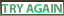
<style>
.page{position:relative;width:64px;height:16px;background:#ffffff}
.page>*{position:absolute;margin:0}
.t1{font:13px "MyriadPro-Bold";scale:0.95 1}
</style>
<div class="page">
<p class="t1" style="left:1px;top:4px;width:61px;height:9px">TRY AGAIN</p>
</div>
